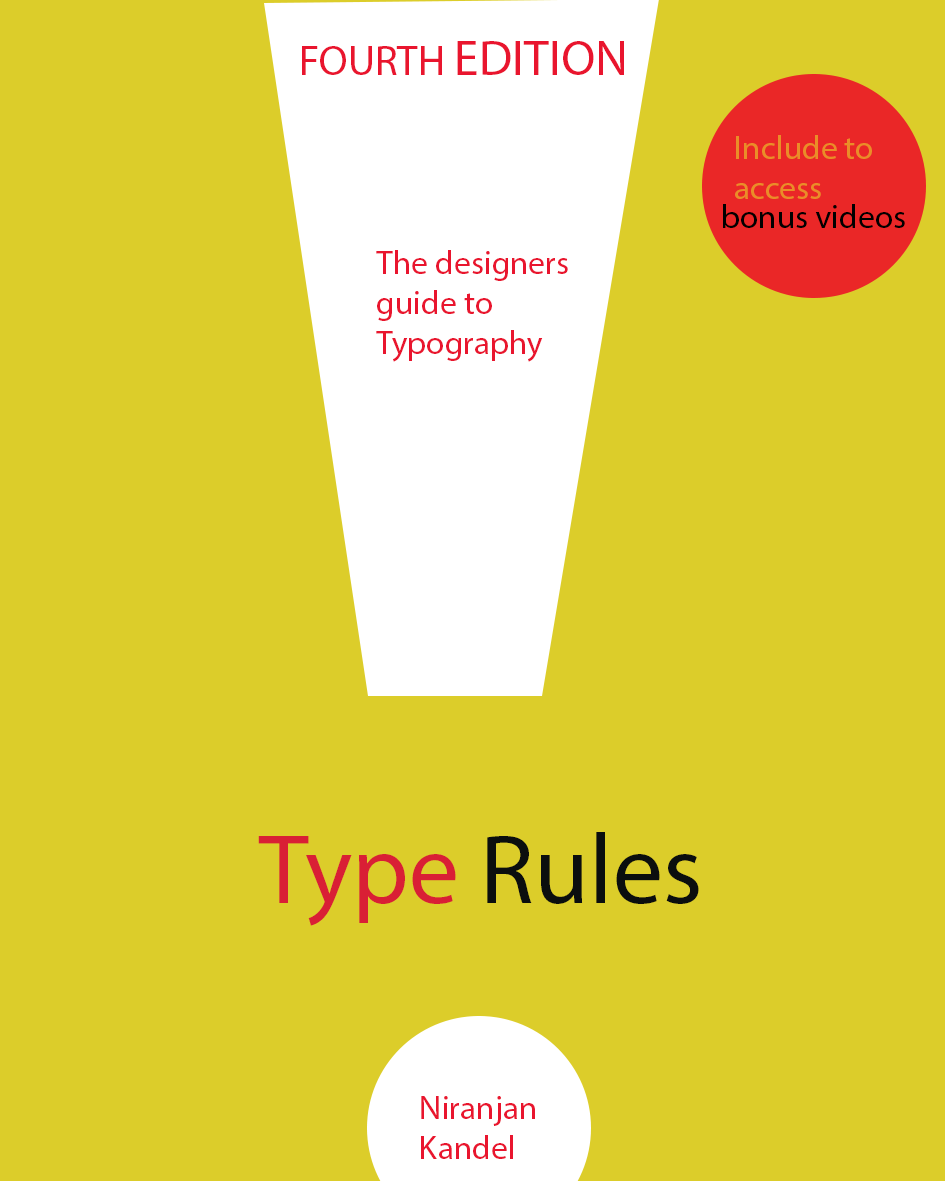
<style>
.page{position:relative;width:945px;height:1181px;background:#dccd2a}
.page>*{position:absolute;margin:0}
.t1{font:50px "MyriadPro-Regular";color:#e9152e}
.t2{font:41.7px "MyriadPro-Regular";color:#e9152e}
.t3{font:33.3px "MyriadPro-Regular";color:#ea8d28}
.t4{font:33.3px "MyriadPro-Regular";color:#000000}
.t5{font:33.3px "MyriadPro-Regular";color:#e9152e}
.t6{font:100px "MyriadPro-Regular";color:#0b0e0e}
.t7{font:100px "MyriadPro-Regular";color:#d91f35}
</style>
<div class="page">
<p class="t1" style="left:302px;top:41px;width:322px;height:34px"><span class="t2">FOURTH </span>EDITION</p>
<p class="t3" style="left:735px;top:135px;width:137px;height:64px">Include to <br>access</p>
<p class="t4" style="left:723px;top:204px;width:182px;height:24px">bonus videos</p>
<p class="t5" style="left:376px;top:250px;width:192px;height:112px">The designers <br>guide to<br>Typography</p>
<p class="t6" style="left:258px;top:832px;width:441px;height:94px"><span class="t7">Type </span>Rules</p>
<p class="t5" style="left:421px;top:1096px;width:114px;height:63px">Niranjan<br>Kandel</p>
</div>
